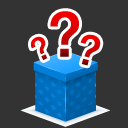
<style>
.page{position:relative;width:128px;height:128px;background:#333333}
.page>*{position:absolute;margin:0}
.t1{font:61.9px "HelveticaNeueLTStd-Md";letter-spacing:0.01em;color:#e20101}
.t2{font:31.8px "HelveticaNeueLTStd-Md";letter-spacing:0.01em;color:#e00202}
.t3{font:41.8px "HelveticaNeueLTStd-Md";letter-spacing:0.01em;color:#e00202}
</style>
<div class="page">
<p class="t1" style="left:50px;top:11px;width:29px;height:46px">?</p>
<p class="t2" style="left:31px;top:36px;width:17px;height:24px;rotate:-26deg">?</p>
<p class="t3" style="left:80px;top:34px;width:21px;height:32px;rotate:15deg">?</p>
</div>
